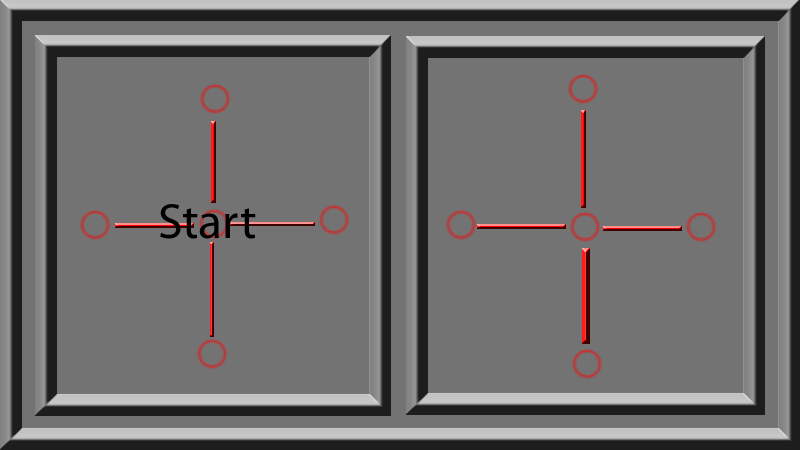
<style>
.page{position:relative;width:800px;height:450px;background:#737373}
.page>*{position:absolute;margin:0}
.t1{font:49.8px "MyriadPro-Regular";color:#000000}
</style>
<div class="page">
<p class="t1" style="left:160px;top:204px;width:96px;height:35px">Start</p>
</div>
